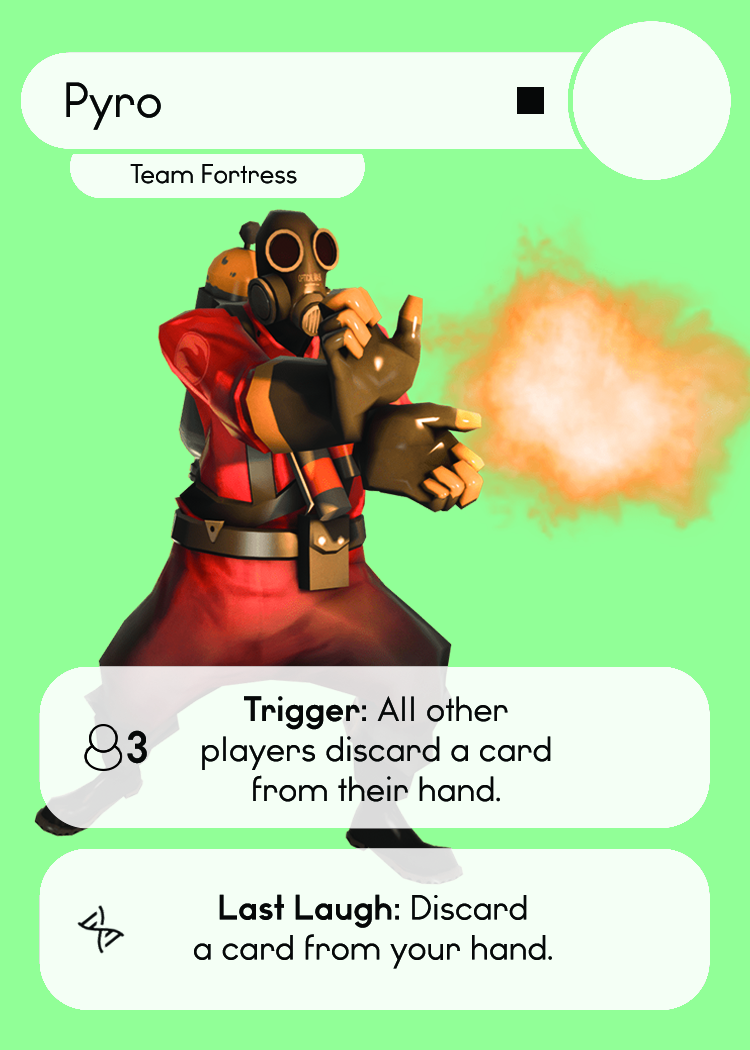
<style>
.page{position:relative;width:750px;height:1050px;background:#91ff97}
.page>*{position:absolute;margin:0}
.t1{font:46.7px "WatchwordRegularDemo";color:#060808}
.t2{font:25.5px "WatchwordRegularDemo";color:#060808}
.t3{font:33.3px "WatchwordRegularDemo";color:#060808}
.t4{font:33.3px "WatchwordBoldDemo";color:#060808}
.t5{font:33.3px "Dosis-Medium";color:#060808}
.t6{font:41.7px "WatchwordBoldDemo";color:#060808}
</style>
<div class="page">
<p class="t1" style="left:66px;top:82px;width:95px;height:48px">Pyro</p>
<p class="t2" style="left:130px;top:164px;width:167px;height:20px">Team Fortress</p>
<p class="t3" style="left:202px;top:696px;width:349px;height:106px;text-align:center"><span class="t4">Trigger: </span>All other<br>players discard a card<br>from their hand<span class="t5">.</span></p>
<p class="t6" style="left:127px;top:730px;width:20px;height:34px">3</p>
<p class="t3" style="left:194px;top:894px;width:358px;height:75px;text-align:center"><span class="t4">Last Laugh: </span>Discard<br>a card from your hand<span class="t5">.</span></p>
</div>
